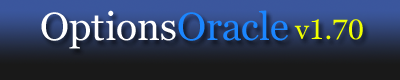
<style>
.page{position:relative;width:400px;height:80px;background:#191919}
.page>*{position:absolute;margin:0}
.t1{font:38.9px "Georgia";color:#ffffff}
.t2{font:38.9px "Georgia";color:#1b86ff}
.t3{font:27.8px "Georgia";color:#f0ff00}
</style>
<div class="page">
<p class="t1" style="left:41px;top:10px;width:247px;height:39px">Options<span class="t2">Oracle</span></p>
<p class="t3" style="left:294px;top:19px;width:69px;height:21px">v1.70</p>
</div>
